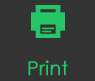
<style>
.page{position:relative;width:95px;height:81px;background:#333333}
.page>*{position:absolute;margin:0}
.t1{font:19.3px "CenturyGothic";color:#26c566;font-weight:bold}
</style>
<div class="page">
<p class="t1" style="left:28px;top:60px;width:40px;height:16px">Print</p>
</div>
